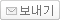
<style>
.page{position:relative;width:60px;height:20px;background:#ffffff}
.page>*{position:absolute;margin:0}
.t1{font:12px "Dotum";color:#757575}
</style>
<div class="page">
<p class="t1" style="left:20px;top:5px;width:33px;height:11px">보내기</p>
</div>
